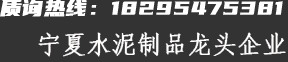
<style>
.page{position:relative;width:288px;height:62px;background:#333333}
.page>*{position:absolute;margin:0}
.t1{font:23px "YouSheBiaoTiHei";color:#ffffff;font-weight:bold}
.t2{font:25px "·ÂËÎ";color:#fffcfc;font-weight:bold}
</style>
<div class="page">
<p class="t1" style="left:0px;top:0px;width:283px;height:17px">质询热线：18295475381</p>
<p class="t2" style="left:38px;top:32px;width:248px;height:25px">宁夏水泥制品龙头企业</p>
</div>
